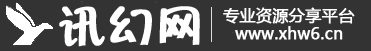
<style>
.page{position:relative;width:371px;height:51px;background:#333333}
.page>*{position:absolute;margin:0}
.t1{font:48px "Ftiebihei";color:#ffffff;font-weight:bold}
.t2{font:16px "MicrosoftYaHei";color:#ffffff;font-weight:bold}
</style>
<div class="page">
<p class="t1" style="left:59px;top:6px;width:141px;height:41px">讯幻网</p>
<p class="t2" style="left:223px;top:7px;width:132px;height:17px">专业资源分享平台</p>
<p class="t2" style="left:235px;top:26px;width:108px;height:14px">www.xhw6.cn</p>
</div>
